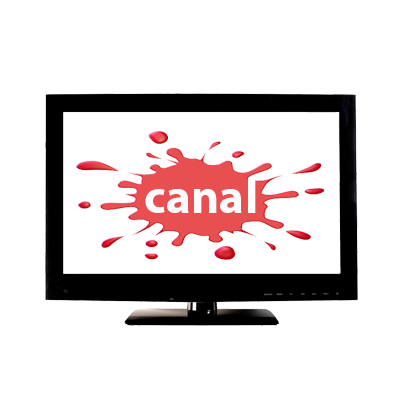
<style>
.page{position:relative;width:400px;height:400px;background:#ffffff}
.page>*{position:absolute;margin:0}
.t1{font:48px "MyriadPro-Bold";color:#fdfbfb}
</style>
<div class="page">
<p class="t1" style="left:145px;top:178px;width:111px;height:35px">canal</p>
</div>
